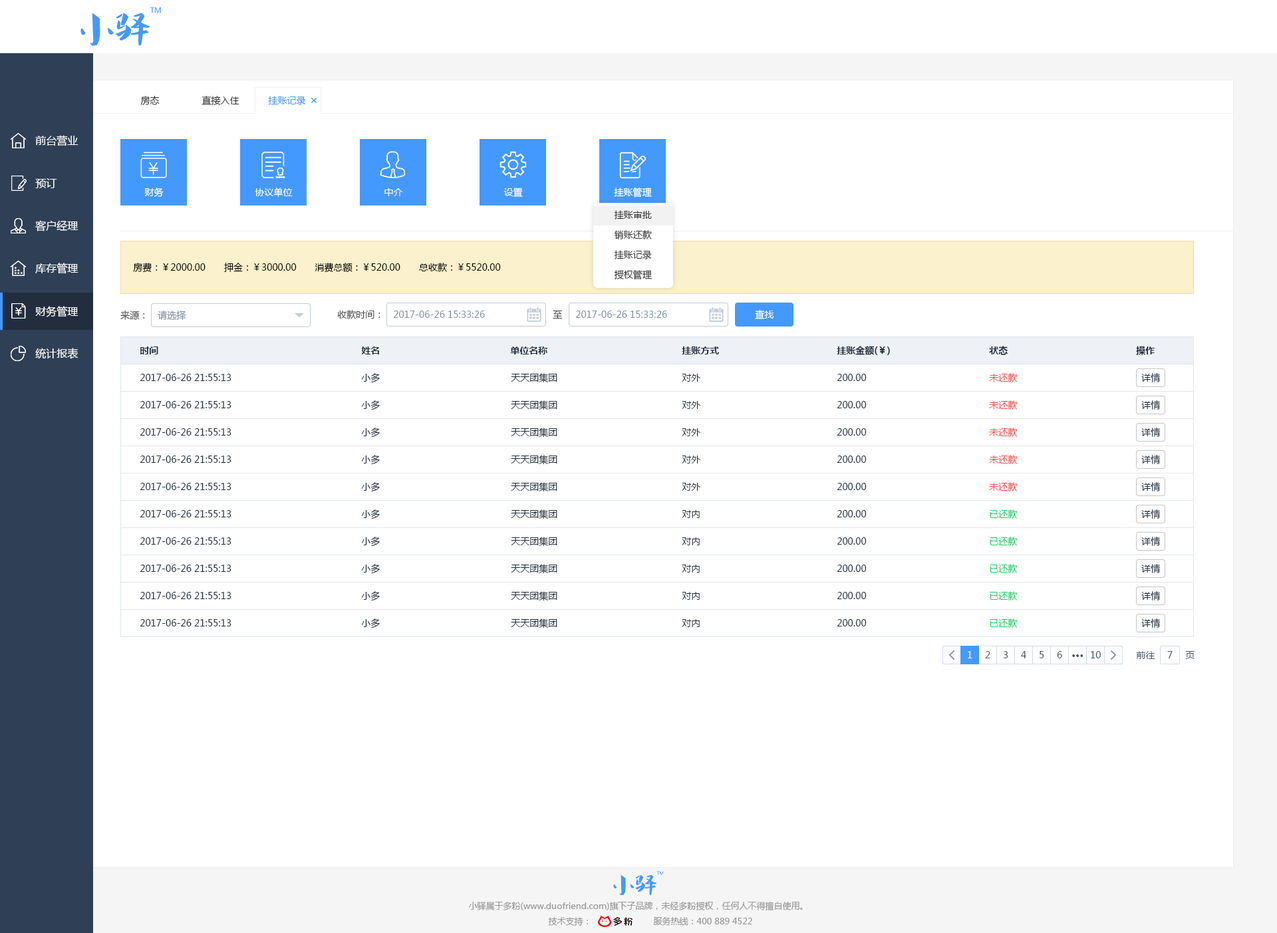
<style>
.page{position:relative;width:1277px;height:933px;background:#ffffff}
.page>*{position:absolute;margin:0}
.t1{font:9.3px "MicrosoftYaHei";color:#333333}
.t2{font:9.3px "MicrosoftYaHei";color:#4499ff}
.t3{font:10.6px "MicrosoftYaHei";color:#ffffff}
.t4{font:9.3px "MicrosoftYaHei";color:#ffffff}
.t5{font:9.3px "MicrosoftYaHei";color:#000000}
.t6{font:9.3px "MicrosoftYaHei";color:#505050}
.t7{font:9.3px "MicrosoftYaHei";color:#8391a5}
.t8{font:9.3px "MicrosoftYaHei-Bold";color:#1f2d3d}
.t9{font:9.3px "MicrosoftYaHei";color:#1f2d3d}
.t10{font:9.3px "MicrosoftYaHei";color:#ff4949}
.t11{font:9.3px "MicrosoftYaHei";color:#13ce66}
.t12{font:9.3px "MicrosoftYaHei";color:#48576a}
.t13{font:9.3px "MicrosoftYaHei-Bold";color:#48576a}
.t14{font:8.6px "MicrosoftYaHei";color:#999999}
</style>
<div class="page">
<p class="t1" style="left:140px;top:96px;width:20px;height:9px">房态</p>
<p class="t1" style="left:202px;top:96px;width:38px;height:9px">直接入住</p>
<p class="t2" style="left:268px;top:96px;width:38px;height:9px">挂账记录</p>
<p class="t3" style="left:35px;top:135px;width:44px;height:11px">前台营业</p>
<p class="t3" style="left:35px;top:178px;width:22px;height:10px">预订</p>
<p class="t4" style="left:144px;top:188px;width:20px;height:9px">财务</p>
<p class="t4" style="left:255px;top:188px;width:38px;height:9px">协议单位</p>
<p class="t4" style="left:385px;top:188px;width:18px;height:8px">中介</p>
<p class="t4" style="left:504px;top:188px;width:19px;height:9px">设置</p>
<p class="t4" style="left:614px;top:188px;width:38px;height:10px">挂账管理</p>
<p class="t3" style="left:35px;top:220px;width:44px;height:12px">客户经理</p>
<p class="t1" style="left:614px;top:210px;width:38px;height:10px">挂账审批</p>
<p class="t1" style="left:615px;top:230px;width:37px;height:10px">销账还款</p>
<p class="t1" style="left:614px;top:250px;width:38px;height:9px">挂账记录</p>
<p class="t3" style="left:35px;top:263px;width:44px;height:11px">库存管理</p>
<p class="t5" style="left:133px;top:263px;width:368px;height:10px">房费：￥2000.00　　押金：￥3000.00　　消费总额：￥520.00　　总收款：￥5520.00</p>
<p class="t1" style="left:614px;top:270px;width:38px;height:10px">授权管理</p>
<p class="t3" style="left:35px;top:306px;width:44px;height:11px">财务管理</p>
<p class="t6" style="left:120px;top:311px;width:25px;height:9px">来源：</p>
<p class="t7" style="left:158px;top:311px;width:28px;height:9px">请选择</p>
<p class="t6" style="left:337px;top:310px;width:44px;height:9px">收款时间：</p>
<p class="t7" style="left:393px;top:311px;width:92px;height:7px">2017-06-26 15:33:26</p>
<p class="t6" style="left:553px;top:310px;width:10px;height:9px">至</p>
<p class="t7" style="left:576px;top:311px;width:91px;height:7px">2017-06-26 15:33:26</p>
<p class="t4" style="left:755px;top:310px;width:19px;height:9px">查找</p>
<p class="t3" style="left:35px;top:348px;width:44px;height:11px">统计报表</p>
<p class="t8" style="left:140px;top:347px;width:18px;height:8px">时间</p>
<p class="t8" style="left:361px;top:347px;width:18px;height:8px">姓名</p>
<p class="t8" style="left:510px;top:347px;width:38px;height:8px">单位名称</p>
<p class="t8" style="left:682px;top:347px;width:37px;height:8px">挂账方式</p>
<p class="t8" style="left:837px;top:346px;width:53px;height:9px">挂账金额(￥)</p>
<p class="t8" style="left:989px;top:346px;width:19px;height:9px">状态</p>
<p class="t8" style="left:1136px;top:346px;width:19px;height:9px">操作</p>
<p class="t9" style="left:140px;top:374px;width:92px;height:7px">2017-06-26 21:55:13</p>
<p class="t9" style="left:361px;top:373px;width:19px;height:10px">小多</p>
<p class="t9" style="left:511px;top:373px;width:47px;height:10px">天天团集团</p>
<p class="t9" style="left:682px;top:374px;width:19px;height:8px">对外</p>
<p class="t9" style="left:837px;top:374px;width:30px;height:7px">200.00</p>
<p class="t10" style="left:989px;top:373px;width:29px;height:10px">未还款</p>
<p class="t9" style="left:1142px;top:373px;width:19px;height:10px">详情</p>
<p class="t9" style="left:140px;top:401px;width:92px;height:8px">2017-06-26 21:55:13</p>
<p class="t9" style="left:361px;top:401px;width:19px;height:10px">小多</p>
<p class="t9" style="left:511px;top:401px;width:47px;height:10px">天天团集团</p>
<p class="t9" style="left:682px;top:401px;width:19px;height:8px">对外</p>
<p class="t9" style="left:837px;top:401px;width:30px;height:8px">200.00</p>
<p class="t10" style="left:989px;top:401px;width:29px;height:9px">未还款</p>
<p class="t9" style="left:1142px;top:401px;width:19px;height:9px">详情</p>
<p class="t9" style="left:140px;top:428px;width:92px;height:8px">2017-06-26 21:55:13</p>
<p class="t9" style="left:361px;top:428px;width:19px;height:10px">小多</p>
<p class="t9" style="left:511px;top:428px;width:47px;height:10px">天天团集团</p>
<p class="t9" style="left:682px;top:428px;width:19px;height:8px">对外</p>
<p class="t9" style="left:837px;top:428px;width:30px;height:8px">200.00</p>
<p class="t10" style="left:989px;top:428px;width:29px;height:9px">未还款</p>
<p class="t9" style="left:1142px;top:428px;width:19px;height:9px">详情</p>
<p class="t9" style="left:140px;top:456px;width:92px;height:7px">2017-06-26 21:55:13</p>
<p class="t9" style="left:361px;top:455px;width:19px;height:10px">小多</p>
<p class="t9" style="left:511px;top:455px;width:47px;height:10px">天天团集团</p>
<p class="t9" style="left:682px;top:456px;width:19px;height:8px">对外</p>
<p class="t9" style="left:837px;top:456px;width:30px;height:7px">200.00</p>
<p class="t10" style="left:989px;top:455px;width:29px;height:9px">未还款</p>
<p class="t9" style="left:1142px;top:455px;width:19px;height:9px">详情</p>
<p class="t9" style="left:140px;top:483px;width:92px;height:7px">2017-06-26 21:55:13</p>
<p class="t9" style="left:361px;top:482px;width:19px;height:10px">小多</p>
<p class="t9" style="left:511px;top:482px;width:47px;height:10px">天天团集团</p>
<p class="t9" style="left:682px;top:483px;width:19px;height:8px">对外</p>
<p class="t9" style="left:837px;top:483px;width:30px;height:7px">200.00</p>
<p class="t10" style="left:989px;top:482px;width:29px;height:10px">未还款</p>
<p class="t9" style="left:1142px;top:482px;width:19px;height:10px">详情</p>
<p class="t9" style="left:361px;top:510px;width:19px;height:10px">小多</p>
<p class="t9" style="left:511px;top:510px;width:47px;height:10px">天天团集团</p>
<p class="t11" style="left:990px;top:510px;width:28px;height:9px">已还款</p>
<p class="t9" style="left:1142px;top:510px;width:19px;height:9px">详情</p>
<p class="t9" style="left:140px;top:510px;width:92px;height:8px">2017-06-26 21:55:13</p>
<p class="t9" style="left:682px;top:510px;width:18px;height:8px">对内</p>
<p class="t9" style="left:837px;top:510px;width:30px;height:8px">200.00</p>
<p class="t9" style="left:140px;top:538px;width:92px;height:7px">2017-06-26 21:55:13</p>
<p class="t9" style="left:361px;top:537px;width:19px;height:10px">小多</p>
<p class="t9" style="left:511px;top:537px;width:47px;height:10px">天天团集团</p>
<p class="t9" style="left:682px;top:538px;width:18px;height:8px">对内</p>
<p class="t9" style="left:837px;top:538px;width:30px;height:7px">200.00</p>
<p class="t11" style="left:990px;top:537px;width:28px;height:9px">已还款</p>
<p class="t9" style="left:1142px;top:537px;width:19px;height:9px">详情</p>
<p class="t9" style="left:140px;top:565px;width:92px;height:7px">2017-06-26 21:55:13</p>
<p class="t9" style="left:361px;top:564px;width:19px;height:10px">小多</p>
<p class="t9" style="left:511px;top:564px;width:47px;height:10px">天天团集团</p>
<p class="t9" style="left:682px;top:565px;width:18px;height:8px">对内</p>
<p class="t9" style="left:837px;top:565px;width:30px;height:7px">200.00</p>
<p class="t11" style="left:990px;top:564px;width:28px;height:10px">已还款</p>
<p class="t9" style="left:1142px;top:564px;width:19px;height:10px">详情</p>
<p class="t9" style="left:140px;top:592px;width:92px;height:7px">2017-06-26 21:55:13</p>
<p class="t9" style="left:361px;top:591px;width:19px;height:10px">小多</p>
<p class="t9" style="left:511px;top:591px;width:47px;height:10px">天天团集团</p>
<p class="t9" style="left:682px;top:592px;width:18px;height:8px">对内</p>
<p class="t9" style="left:837px;top:592px;width:30px;height:7px">200.00</p>
<p class="t11" style="left:990px;top:591px;width:28px;height:10px">已还款</p>
<p class="t9" style="left:1142px;top:591px;width:19px;height:10px">详情</p>
<p class="t9" style="left:140px;top:619px;width:92px;height:8px">2017-06-26 21:55:13</p>
<p class="t9" style="left:361px;top:619px;width:19px;height:10px">小多</p>
<p class="t9" style="left:511px;top:619px;width:47px;height:10px">天天团集团</p>
<p class="t9" style="left:682px;top:619px;width:18px;height:8px">对内</p>
<p class="t9" style="left:837px;top:619px;width:30px;height:8px">200.00</p>
<p class="t11" style="left:990px;top:619px;width:28px;height:9px">已还款</p>
<p class="t9" style="left:1142px;top:619px;width:19px;height:9px">详情</p>
<p class="t4" style="left:968px;top:651px;width:5px;height:8px">1</p>
<p class="t12" style="left:985px;top:651px;width:6px;height:8px">2</p>
<p class="t12" style="left:1003px;top:651px;width:6px;height:8px">3</p>
<p class="t12" style="left:1021px;top:651px;width:6px;height:8px">4</p>
<p class="t12" style="left:1040px;top:651px;width:5px;height:8px">5</p>
<p class="t12" style="left:1057px;top:651px;width:6px;height:8px">6</p>
<p class="t12" style="left:1091px;top:651px;width:10px;height:8px">10</p>
<p class="t12" style="left:1136px;top:651px;width:20px;height:8px">前往</p>
<p class="t12" style="left:1168px;top:651px;width:5px;height:8px">7</p>
<p class="t12" style="left:1186px;top:651px;width:9px;height:8px">页</p>
<p class="t13" style="left:1073px;top:655px;width:11px;height:2px">···</p>
<p class="t14" style="left:468px;top:902px;width:335px;height:9px">小驿属于多粉(www.duofriend.com)旗下子品牌，未经多粉授权，任何人不得擅自使用。</p>
<p class="t14" style="left:548px;top:917px;width:40px;height:9px">技术支持：</p>
<p class="t14" style="left:653px;top:917px;width:99px;height:9px">服务热线：400 889 4522</p>
</div>
